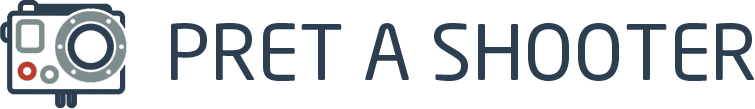
<style>
.page{position:relative;width:755px;height:109px;background:#ffffff}
.page>*{position:absolute;margin:0}
.t1{font:76px "NeoSans";color:#2c3e50;text-transform:uppercase}
</style>
<div class="page">
<p class="t1" style="left:171px;top:23px;width:583px;height:58px">pret a shooter</p>
</div>
